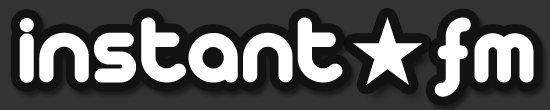
<style>
.page{position:relative;width:550px;height:110px;background:#333333}
.page>*{position:absolute;margin:0}
.t1{font:100px "Arista2.0";letter-spacing:-0.025em;color:#ffffff;font-weight:bold}
.t2{font:86px "AdobeFanHeitiStd-Bold";letter-spacing:0.025em;color:#ffffff}
</style>
<div class="page">
<p class="t1" style="left:19px;top:17px;width:515px;height:80px">instant    fm</p>
<p class="t2" style="left:353px;top:17px;width:70px;height:68px">★</p>
</div>
